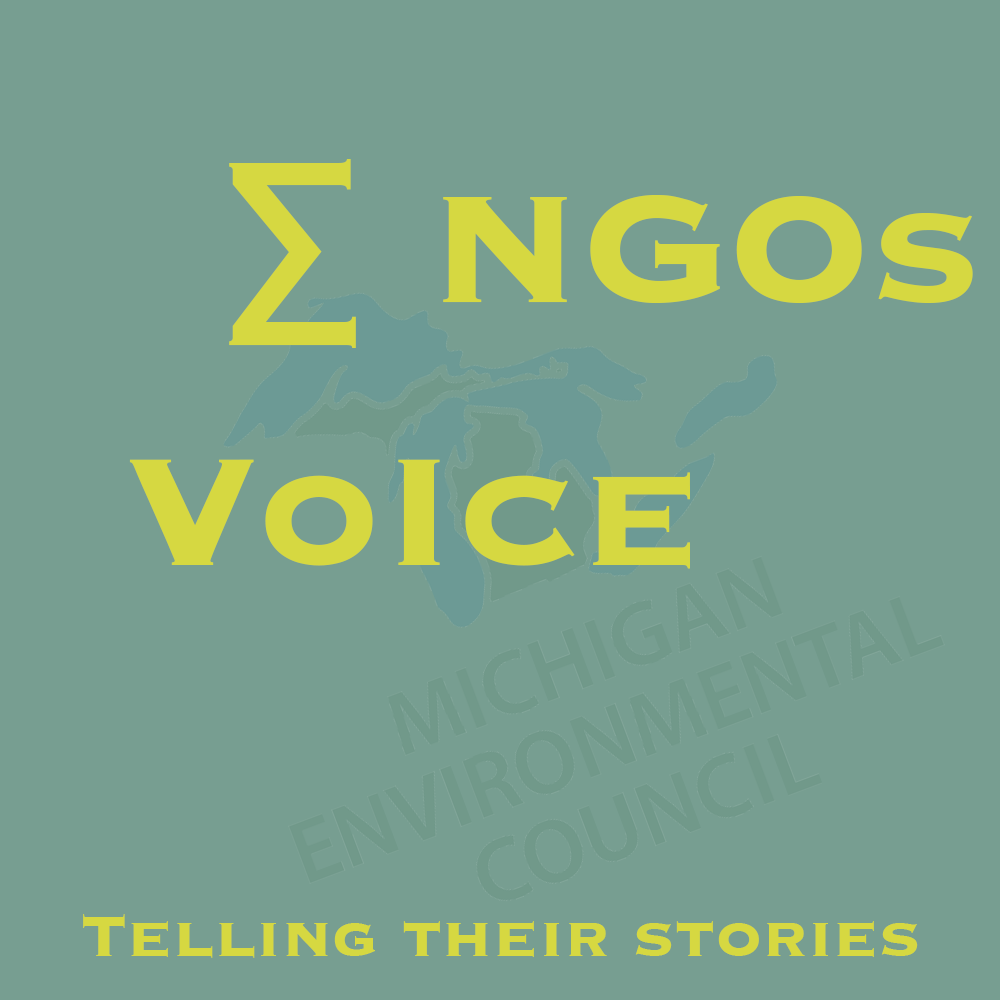
<style>
.page{position:relative;width:1000px;height:1000px;background:#779e91}
.page>*{position:absolute;margin:0}
.t1{font:200px "Copperplate-Bold";color:#d6d841}
.t2{font:200.1px "Copperplate-Bold";color:#d6d841}
.t3{font:75.2px "Copperplate-Bold";color:#d6d841}
</style>
<div class="page">
<p class="t1" style="left:229px;top:159px;width:744px;height:189px">∑ NGOs</p>
<p class="t2" style="left:129px;top:459px;width:561px;height:110px">VoIce</p>
<p class="t3" style="left:83px;top:914px;width:835px;height:44px">Telling their stories</p>
</div>
